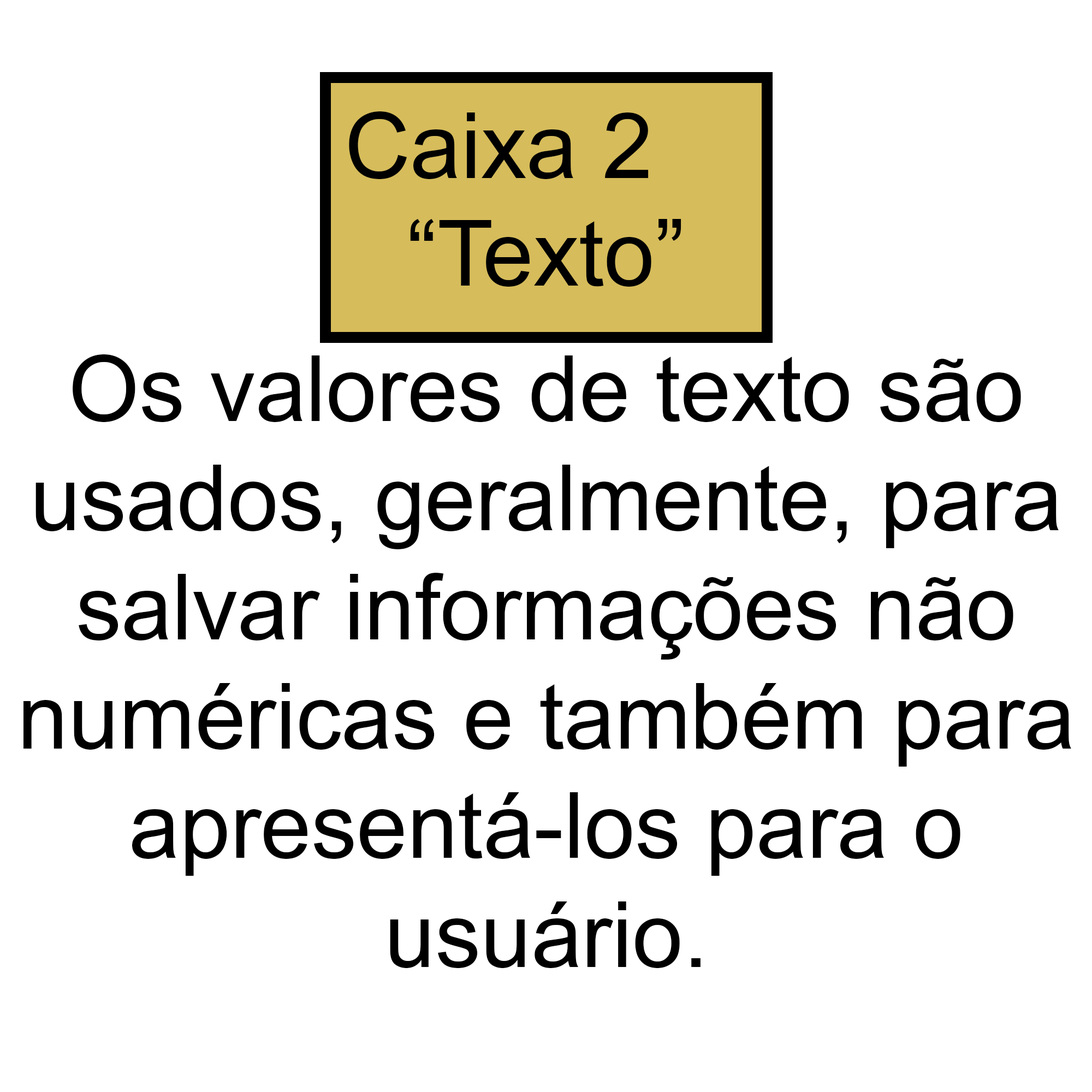
<style>
.page{position:relative;width:1092px;height:1092px;background:#ffffff}
.page>*{position:absolute;margin:0}
.t1{font:91px "ArialMT";color:#000000}
</style>
<div class="page">
<p class="t1" style="left:349px;top:111px;width:300px;height:68px">Caixa 2</p>
<p class="t1" style="left:410px;top:219px;width:271px;height:68px">“Texto”</p>
<p class="t1" style="left:23px;top:354px;width:1048px;height:614px;text-align:center">Os valores de texto são<br>usados, geralmente, para<br>salvar informações não<br>numéricas e também para<br>apresentá-los para o<br>usuário.</p>
</div>
